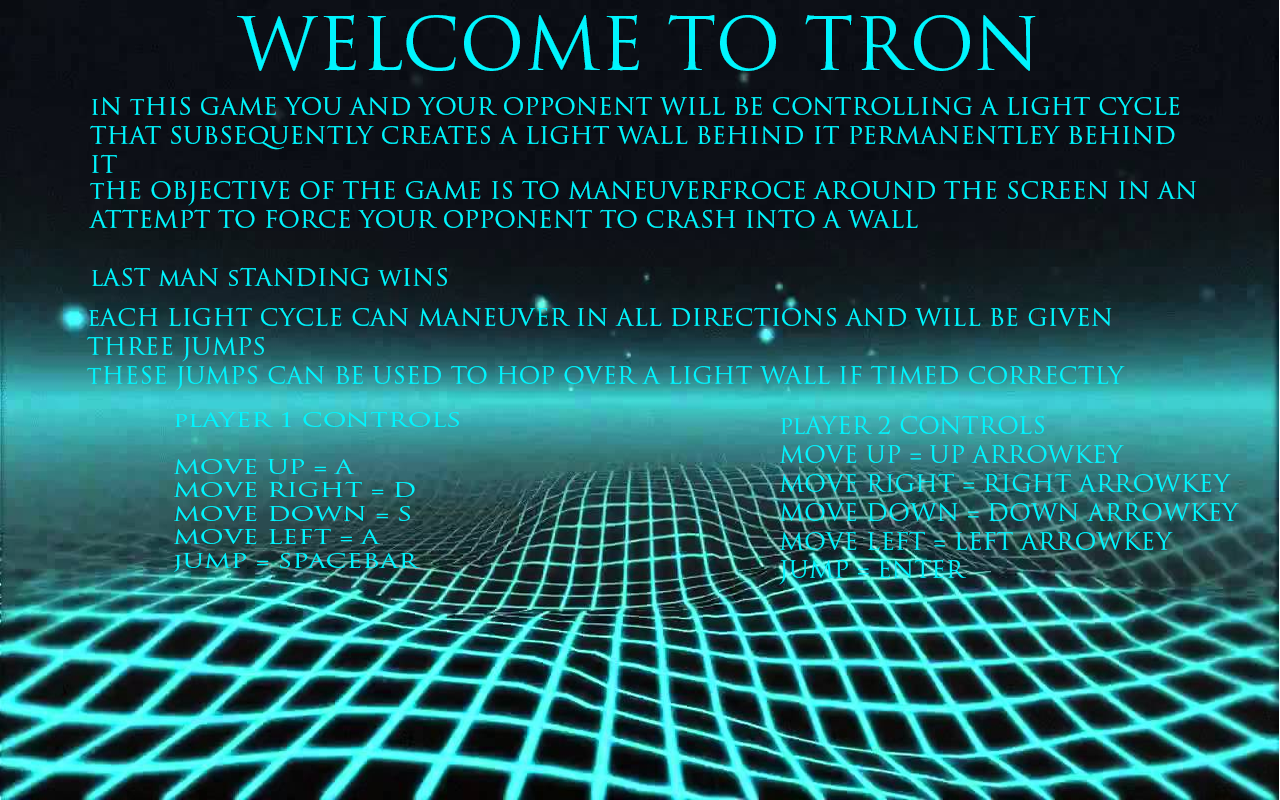
<style>
.page{position:relative;width:1280px;height:800px}
.page>*{position:absolute;margin:0}
.t1{font:72px "TrajanPro-Regular";color:#00f5fe}
.t2{font:24px "TrajanPro-Regular";color:#00f5fe}
.t3{font:19.5px "TrajanPro-Regular";color:#00f5fe;scale:1.32 1}
</style>
<div class="page">
<p class="t1" style="left:237px;top:15px;width:799px;height:56px">WELCOME TO TRON</p>
<p class="t2" style="left:90px;top:96px;width:1090px;height:77px;text-align:right">iN tHIS GAME YOU AND YOUR OPPONENT WILL BE CONTROLLING A LIGHT CYCLE THAT SUBSEQUENTLY CREATES A LIGHT WALL BEHIND IT PERMANENTLEY BEHIND IT</p>
<p class="t2" style="left:89px;top:180px;width:1107px;height:107px;text-align:right">tHE OBJECTIVE OF THE GAME IS TO MANEUVERFROCE AROUND THE SCREEN IN AN ATTEMPT TO FORCE YOUR OPPONENT TO CRASH INTO A WALL <br><br>lAST mAN sTANDING wINS</p>
<p class="t2" style="left:87px;top:307px;width:1038px;height:84px;text-align:right">eACH LIGHT CYCLE CAN MANEUVER IN ALL DIRECTIONS AND WILL BE GIVEN THREE JUMPS<br> tHESE JUMPS CAN BE USED TO HOP OVER A LIGHT WALL IF TIMED CORRECTLY</p>
<p class="t3" style="left:174px;top:412px;width:285px;height:160px;text-align:right">plAYER 1 CONTROLS<br><br>MOVE UP = A<br>MOVE RIGHT = D<br>MOVE DOWN = S<br>MOVE LEFT = A<br>jUMP = SPACEBAR</p>
<p class="t2" style="left:779px;top:415px;width:460px;height:170px;text-align:right">plAYER 2 CONTROLS<br>MOVE UP = UP ARROWKEY<br>MOVE RIGHT = RIGHT ARROWKEY<br>MOVE DOWN = DOWN ARROWKEY<br>MOVE LEFT = LEFT ARROWKEY<br>JUMP = ENTER</p>
</div>
